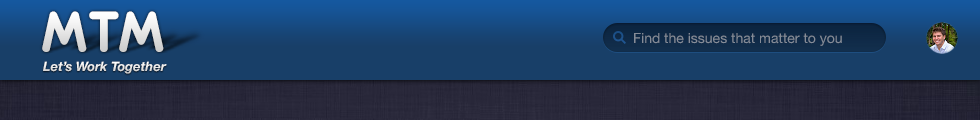
<style>
.page{position:relative;width:980px;height:120px;background:#183f68}
.page>*{position:absolute;margin:0}
.t1{font:62.5px "Eurofurencebold";color:#eaeaea}
.t2{font:14px "HelveticaNeue";color:#858c98}
.t3{font:13px "HelveticaNeue-BoldItalic";color:#e8e8e8}
</style>
<div class="page">
<p class="t1" style="left:42px;top:11px;width:122px;height:41px">MTM</p>
<p class="t2" style="left:634px;top:33px;width:208px;height:13px">Find the issues that matter to you</p>
<p class="t3" style="left:43px;top:61px;width:124px;height:13px">Let’s Work Together</p>
</div>
